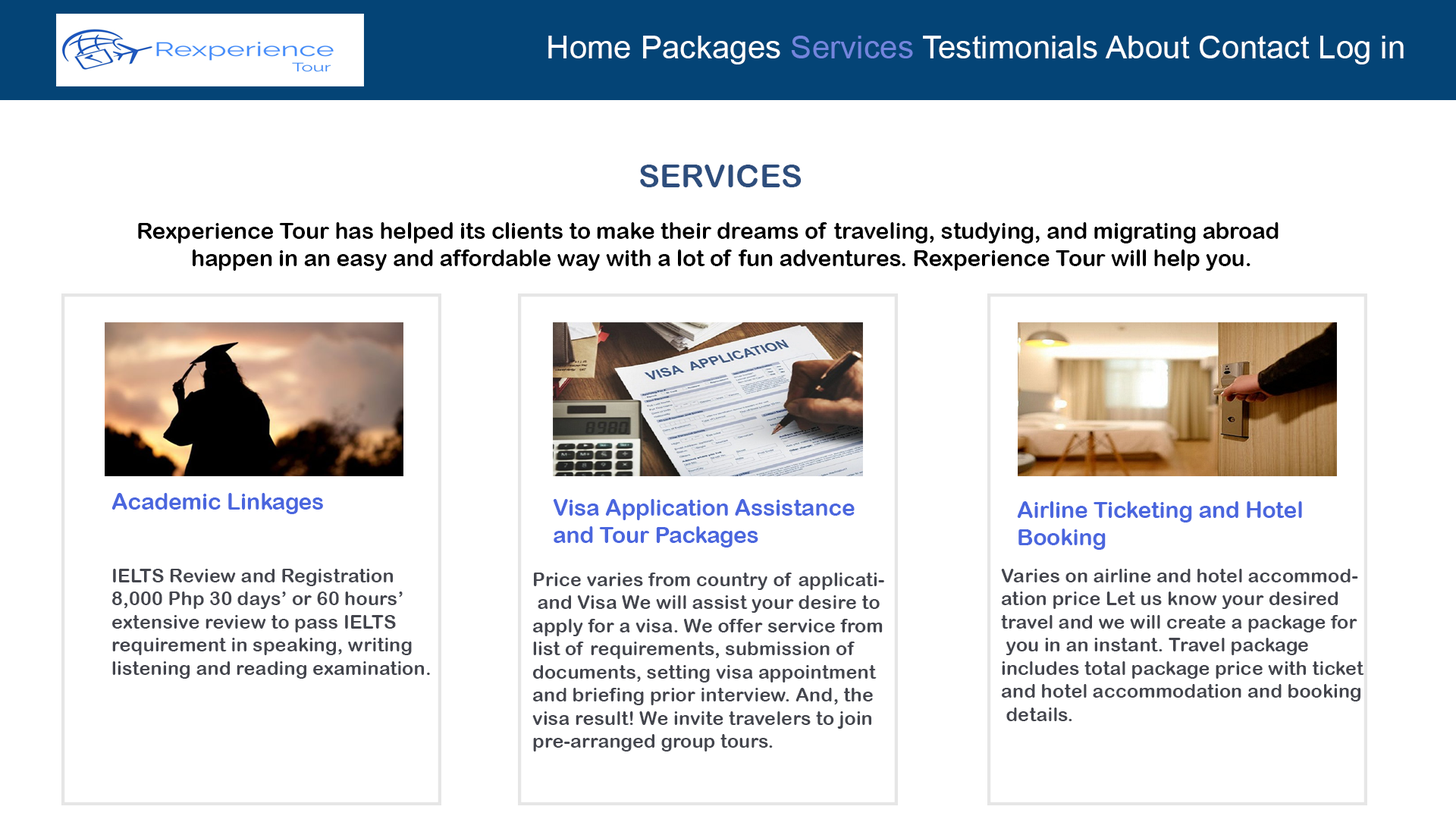
<style>
.page{position:relative;width:1456px;height:819px;background:#ffffff}
.page>*{position:absolute;margin:0}
.t1{font:32.1px "ArialRoundedMTBold";color:#2e4e7d}
.t2{font:22.5px "ArialRoundedMTBold";color:#000000}
.t3{font:22.5px "ArialRoundedMTBold";color:#4a66de}
.t4{font:19.3px "ArialRoundedMTBold";color:#43454d}
</style>
<div class="page">
<p class="t1" style="left:640px;top:165px;width:162px;height:22px">SERVICES</p>
<p class="t2" style="left:138px;top:222px;width:1141px;height:49px">Rexperience Tour has helped its clients to make their dreams of traveling, studying, and migrating abroad <br>  happen in an easy and affordable way with a lot of fun adventures. Rexperience Tour will help you.</p>
<p class="t3" style="left:111px;top:493px;width:212px;height:21px">Academic Linkages</p>
<p class="t3" style="left:553px;top:499px;width:302px;height:49px">Visa Application Assistance <br>and Tour Packages</p>
<p class="t3" style="left:1017px;top:501px;width:285px;height:49px">Airline Ticketing and Hotel <br>Booking</p>
<p class="t4" style="left:112px;top:569px;width:318px;height:110px">IELTS Review and Registration <br>8,000 Php 30 days’ or 60 hours’ <br>extensive review to pass IELTS <br>requirement in speaking, writing<br>listening and reading examination.</p>
<p class="t4" style="left:1001px;top:569px;width:363px;height:152px">Varies on airline and hotel accommod-<br>ation price Let us know your desired <br>travel and we will create a package for<br> you in an instant. Travel package <br>includes total package price with ticket<br>and hotel accommodation and booking<br> details.</p>
<p class="t4" style="left:532px;top:573px;width:352px;height:178px">Price varies from country of applicati-<br> and Visa We will assist your desire to <br>apply for a visa. We offer service from <br>list of requirements, submission of <br>documents, setting visa appointment <br>and briefing prior interview. And, the <br>visa result! We invite travelers to join <br>pre-arranged group tours.</p>
</div>
